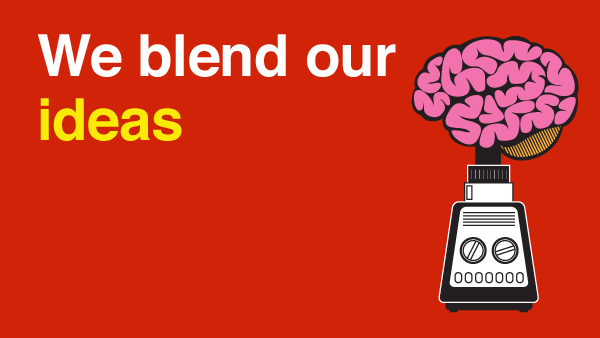
<style>
.page{position:relative;width:600px;height:338px;background:#d02307}
.page>*{position:absolute;margin:0}
.t1{font:58px/63.6px "Helvetica-Bold";letter-spacing:-0.01em;color:#ffffff}
.t2{font:58px/63.6px "Helvetica-Bold";letter-spacing:-0.01em;color:#f9eb07}
</style>
<div class="page">
<p class="t1" style="left:37px;top:34px;width:359px;height:107px">We blend our<br><span class="t2">ideas</span></p>
</div>
